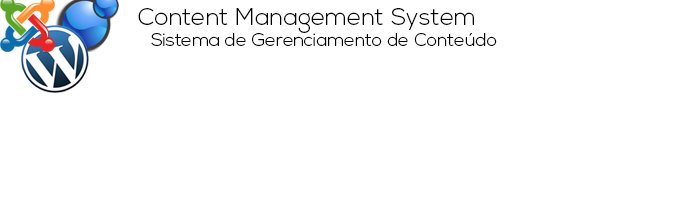
<style>
.page{position:relative;width:687px;height:200px;background:#ffffff}
.page>*{position:absolute;margin:0}
.t1{font:24px "NexaLight";color:#010101}
.t2{font:18px "NexaLight";color:#000000}
</style>
<div class="page">
<p class="t1" style="left:138px;top:8px;width:336px;height:25px">Content Management System</p>
<p class="t2" style="left:151px;top:33px;width:346px;height:13px">Sistema de Gerenciamento de Conteúdo</p>
</div>
